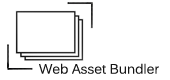
<style>
.page{position:relative;width:170px;height:80px;background:#ffffff}
.page>*{position:absolute;margin:0}
.t1{font:13.3px "Kalinga";color:#151515}
</style>
<div class="page">
<p class="t1" style="left:39px;top:63px;width:120px;height:11px">Web Asset Bundler</p>
</div>
